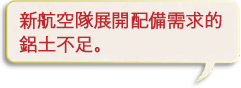
<style>
.page{position:relative;width:241px;height:88px;background:#f3ede5}
.page>*{position:absolute;margin:0}
.t1{font:18px/24px "GothicMB101Pr6N-Light";color:#c1262e;font-weight:bold}
</style>
<div class="page">
<p class="t1" style="left:19px;top:11px;width:203px;height:42px">新航空隊展開配備需求的<br>鋁土不足。</p>
</div>
